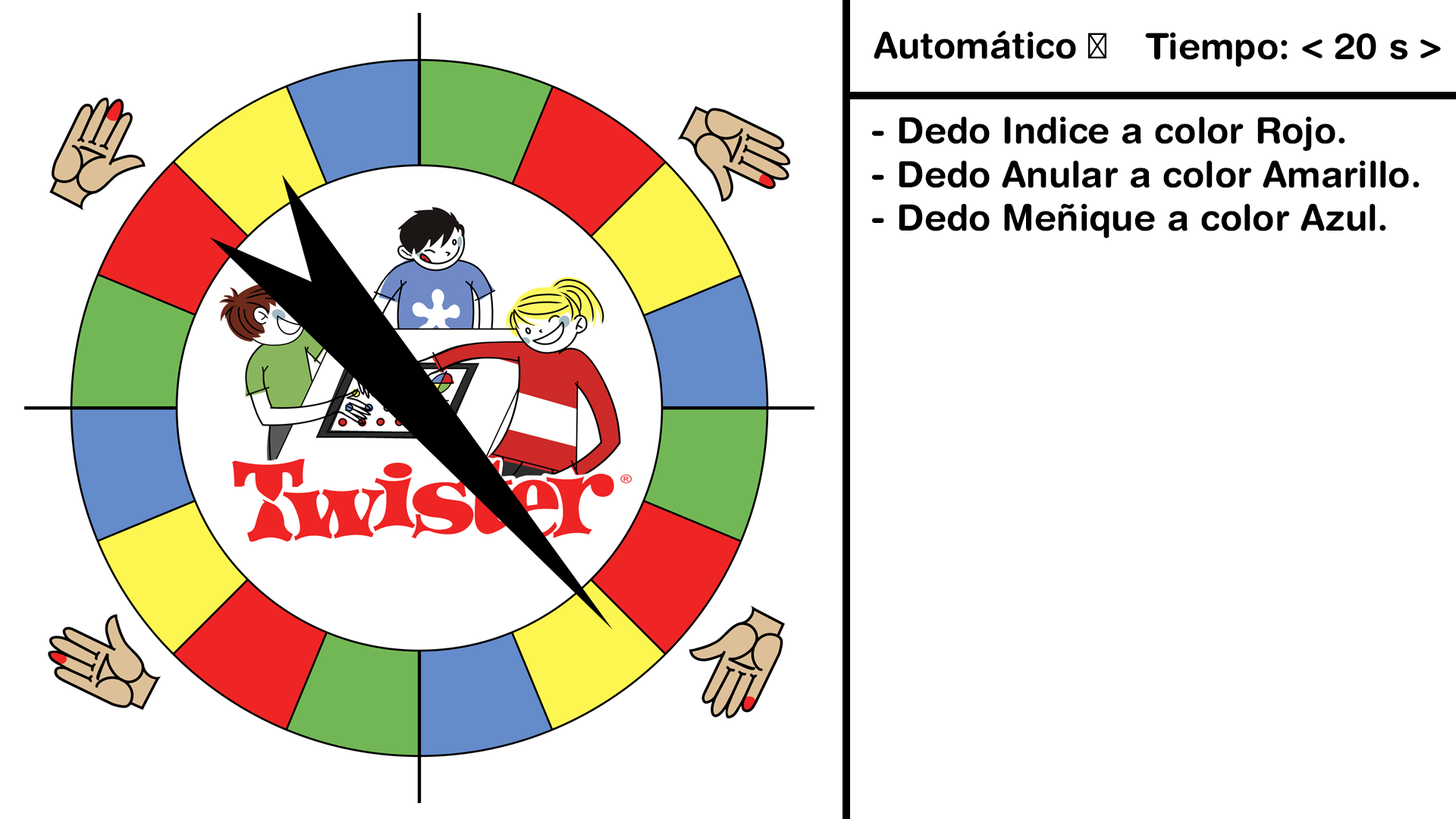
<style>
.page{position:relative;width:1456px;height:819px;background:#ffffff}
.page>*{position:absolute;margin:0}
.t1{font:36.4px "HelveticaRounded-Bold";color:#000000}
.t2{font:36.4px "MyriadPro-Regular";color:#000000}
</style>
<div class="page">
<p class="t1" style="left:874px;top:30px;width:232px;height:29px">Automático <span class="t2">□</span></p>
<p class="t1" style="left:1145px;top:32px;width:296px;height:35px">Tiempo: &lt; 20 s &gt;</p>
<p class="t1" style="left:872px;top:116px;width:548px;height:122px">- Dedo Indice a color Rojo.<br>- Dedo Anular a color Amarillo.<br>- Dedo Meñique a color Azul.</p>
</div>
